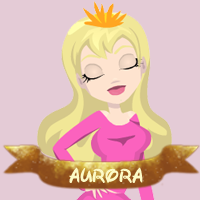
<style>
.page{position:relative;width:200px;height:200px;background:#e4cbd6}
.page>*{position:absolute;margin:0}
.t1{font:37.4px "Waltograph";color:#fcfac7}
</style>
<div class="page">
<p class="t1" style="left:69px;top:167px;width:74px;height:16px">aurora</p>
</div>
